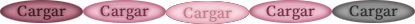
<style>
.page{position:relative;width:415px;height:24px;background:#ffffff}
.page>*{position:absolute;margin:0}
.t1{font:17px "OfficialFateFont-Medium";color:#441a25;font-weight:bold}
.t2{font:17px "OfficialFateFont-Medium";color:#763145;font-weight:bold}
.t3{font:17px "OfficialFateFont-Medium";color:#2f2f2f;font-weight:bold}
.t4{font:17px "OfficialFateFont-Medium";color:#c57e89;font-weight:bold}
</style>
<div class="page">
<p class="t1" style="left:17px;top:5px;width:49px;height:15px">Cargar</p>
<p class="t2" style="left:100px;top:5px;width:49px;height:15px">Cargar</p>
<p class="t2" style="left:266px;top:5px;width:49px;height:15px">Cargar</p>
<p class="t3" style="left:349px;top:5px;width:49px;height:15px">Cargar</p>
<p class="t4" style="left:183px;top:7px;width:49px;height:15px">Cargar</p>
</div>
